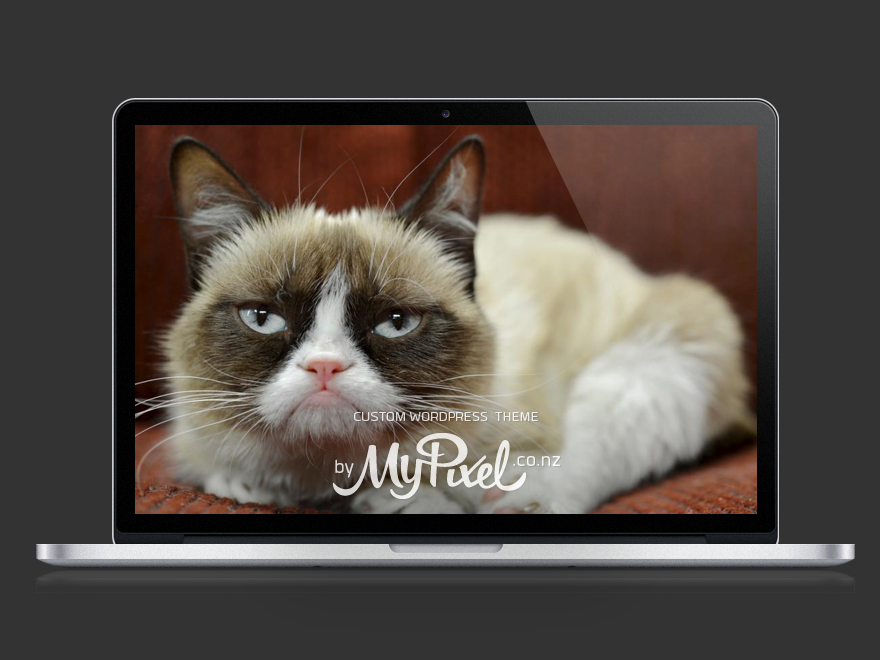
<style>
.page{position:relative;width:880px;height:660px;background:#333333}
.page>*{position:absolute;margin:0}
.t1{font:18px "Quan-Rounded";color:#e9e6e3;text-transform:uppercase}
.t2{font:24.6px "Quan-Rounded";color:#dcd9d6}
.t3{font:24.6px "Quan-Rounded";color:#ffffff}
</style>
<div class="page">
<p class="t1" style="left:354px;top:412px;width:184px;height:9px">Custom WordPress  Theme</p>
<p class="t2" style="left:335px;top:459px;width:19px;height:19px">by</p>
<p class="t3" style="left:513px;top:456px;width:47px;height:10px">.co.nz</p>
</div>
